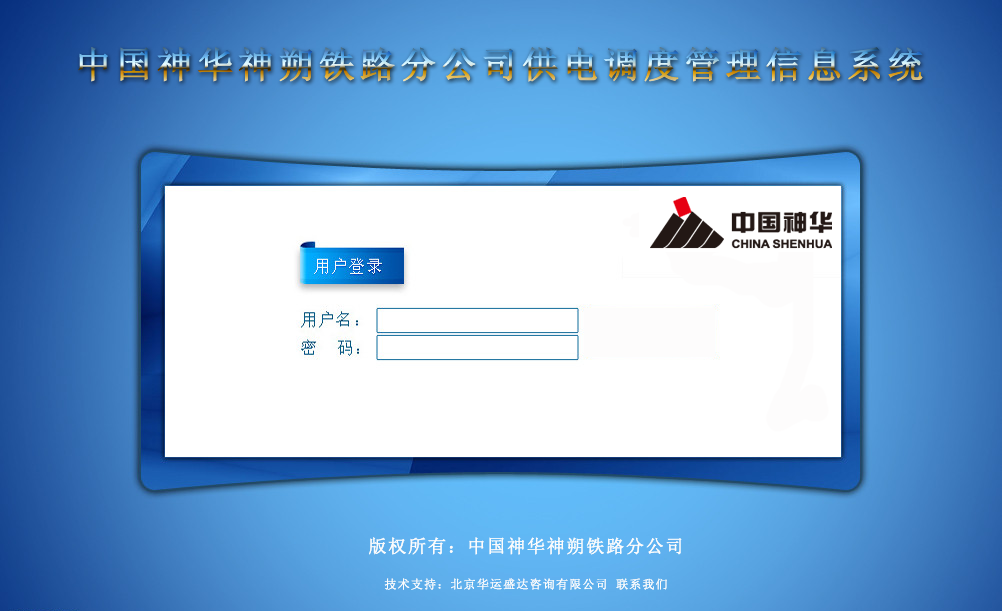
<style>
.page{position:relative;width:1002px;height:611px;background:#ffffff}
.page>*{position:absolute;margin:0}
.t1{font:36px "NSimSun";letter-spacing:0.1em;font-weight:bold}
.t2{font:12px/18px "NSimSun";letter-spacing:0.1em;color:#fdfcfc;font-weight:bold}
.t3{font:18px/18px "NSimSun";letter-spacing:0.1em;color:#fdfcfc;font-weight:bold}
</style>
<div class="page">
<p class="t1" style="left:78px;top:47px;width:845px;height:35px">中国神华神朔铁路分公司供电调度管理信息系统</p>
<p class="t2" style="left:369px;top:537px;width:313px;height:53px;text-align:center"><span class="t3">版权所有：中国神华神朔铁路分公司<br> <br></span>技术支持：北京华运盛达咨询有限公司 联系我们</p>
</div>
